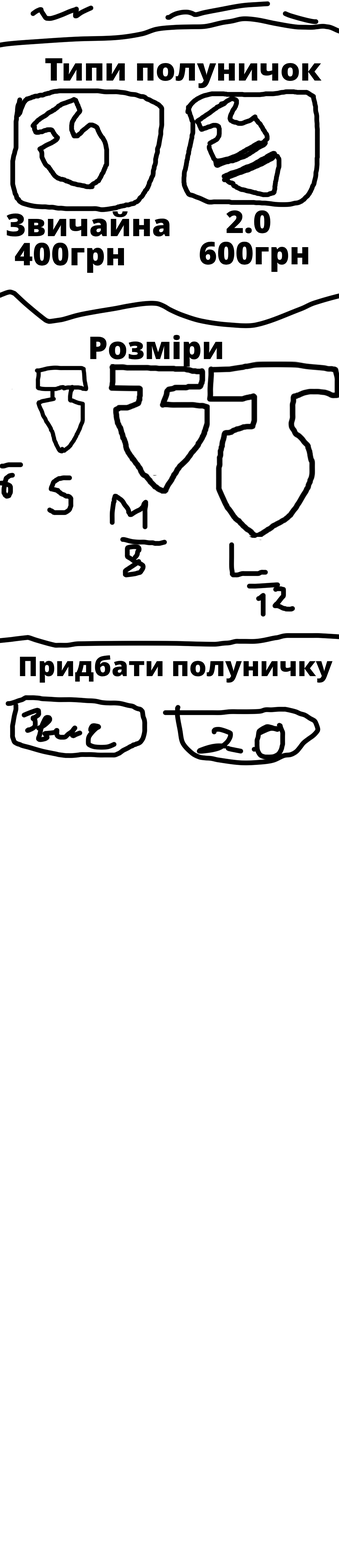
<style>
.page{position:relative;width:339px;height:1568px;background:#ffffff}
.page>*{position:absolute;margin:0}
.t1{font:31.3px "NotoSans-Black";color:#000000}
.t2{font:27.1px "NotoSans-Black";color:#000000}
</style>
<div class="page">
<p class="t1" style="left:45px;top:58px;width:276px;height:30px">Типи полуничок</p>
<p class="t1" style="left:7px;top:211px;width:162px;height:25px">Звичайна</p>
<p class="t1" style="left:226px;top:210px;width:44px;height:24px">2.0</p>
<p class="t1" style="left:15px;top:242px;width:109px;height:31px">400грн</p>
<p class="t1" style="left:90px;top:335px;width:132px;height:32px">Розміри</p>
<p class="t2" style="left:20px;top:655px;width:312px;height:28px">Придбати полуничку</p>
</div>
